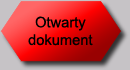
<style>
.page{position:relative;width:130px;height:70px}
.page>*{position:absolute;margin:0}
.t1{font:14.7px "ArialMT";color:#000000}
</style>
<div class="page">
<p class="t1" style="left:28px;top:16px;width:65px;height:30px;text-align:center">Otwarty<br>dokument</p>
</div>
